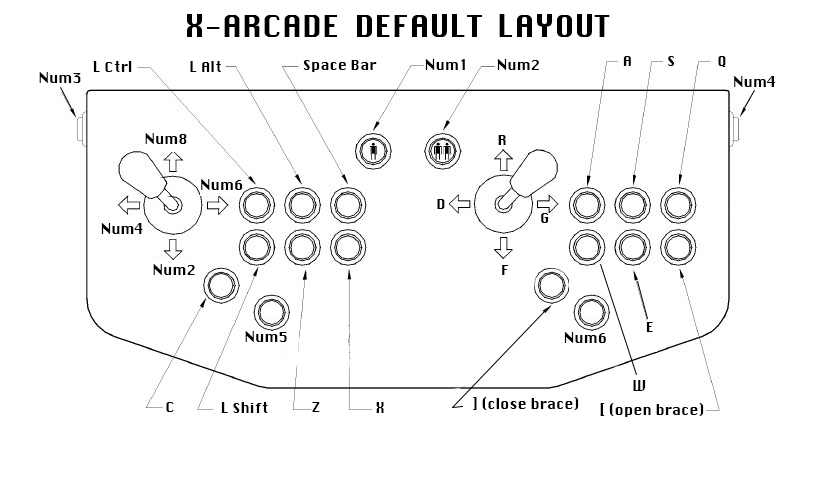
<style>
.page{position:relative;width:822px;height:493px;background:#ffffff}
.page>*{position:absolute;margin:0}
.t1{font:30px "Silom";color:#000000}
.t2{font:14px "Silom";color:#000000}
</style>
<div class="page">
<p class="t1" style="left:187px;top:14px;width:423px;height:23px">X-ARCADE  DEFAULT  LAYOUT</p>
<p class="t2" style="left:93px;top:61px;width:39px;height:11px">L Ctrl</p>
<p class="t2" style="left:190px;top:61px;width:31px;height:11px">L Alt</p>
<p class="t2" style="left:303px;top:60px;width:74px;height:12px">Space Bar</p>
<p class="t2" style="left:425px;top:59px;width:40px;height:11px">Num1</p>
<p class="t2" style="left:497px;top:59px;width:42px;height:11px">Num2</p>
<p class="t2" style="left:623px;top:56px;width:8px;height:10px">A</p>
<p class="t2" style="left:668px;top:56px;width:6px;height:10px">S</p>
<p class="t2" style="left:718px;top:56px;width:8px;height:11px">Q</p>
<p class="t2" style="left:39px;top:72px;width:42px;height:11px">Num3</p>
<p class="t2" style="left:734px;top:76px;width:42px;height:11px">Num4</p>
<p class="t2" style="left:145px;top:133px;width:42px;height:11px">Num8</p>
<p class="t2" style="left:498px;top:135px;width:8px;height:10px">R</p>
<p class="t2" style="left:201px;top:179px;width:42px;height:11px">Num6</p>
<p class="t2" style="left:437px;top:199px;width:8px;height:10px">D</p>
<p class="t2" style="left:541px;top:213px;width:8px;height:10px">G</p>
<p class="t2" style="left:101px;top:223px;width:42px;height:11px">Num4</p>
<p class="t2" style="left:153px;top:264px;width:42px;height:11px">Num2</p>
<p class="t2" style="left:502px;top:265px;width:6px;height:10px">F</p>
<p class="t2" style="left:646px;top:322px;width:7px;height:10px">E</p>
<p class="t2" style="left:245px;top:331px;width:42px;height:11px">Num5</p>
<p class="t2" style="left:564px;top:332px;width:42px;height:11px">Num6</p>
<p class="t2" style="left:633px;top:380px;width:13px;height:11px">W</p>
<p class="t2" style="left:473px;top:397px;width:106px;height:13px">] (close brace)</p>
<p class="t2" style="left:166px;top:402px;width:8px;height:10px">C</p>
<p class="t2" style="left:221px;top:402px;width:47px;height:11px">L Shift</p>
<p class="t2" style="left:312px;top:402px;width:8px;height:10px">Z</p>
<p class="t2" style="left:376px;top:402px;width:8px;height:11px">X</p>
<p class="t2" style="left:600px;top:403px;width:104px;height:14px">[ (open brace)</p>
</div>
